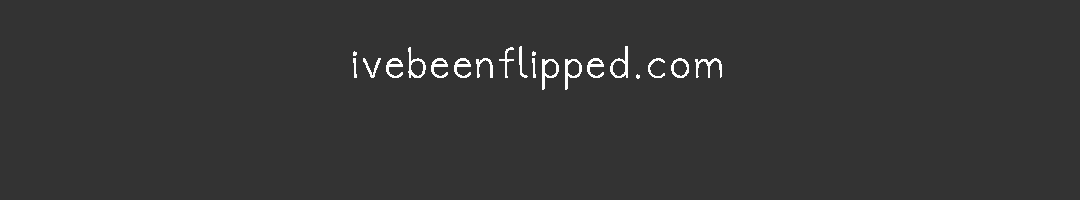
<style>
.page{position:relative;width:1080px;height:200px;background:#333333}
.page>*{position:absolute;margin:0}
.t1{font:33.1px "'-RonySiswadi-15";letter-spacing:0.08em;color:#ffffff}
</style>
<div class="page">
<p class="t1" style="left:353px;top:46px;width:369px;height:44px">ivebeenflipped.com</p>
</div>
